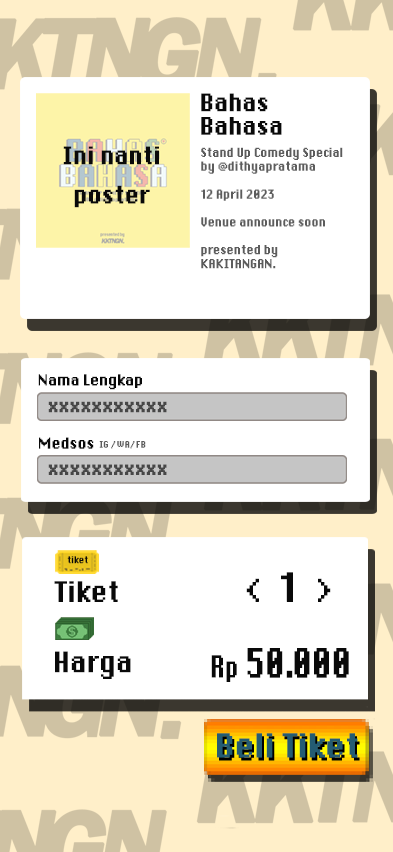
<style>
.page{position:relative;width:393px;height:852px;background:#ffffff}
.page>*{position:absolute;margin:0}
.t1{font:17.1px/23.4px "DePixel-Bold";color:#090909;font-weight:bold;scale:0.89 1}
.t2{font:17.1px/39.2px "DePixel-Bold";color:#090909;font-weight:bold;scale:0.89 1}
.t3{font:8.7px/13.9px "DePixel-Bold";color:#5c5c5c;font-weight:bold;scale:0.89 1}
.t4{font:10.8px "DePixel-Bold";color:#090909;font-weight:bold;scale:0.89 1}
.t5{font:13px "DePixel-Bold";color:#474747;font-weight:bold;scale:0.89 1}
.t6{font:6.4px "DePixel-Bold";color:#5c5c5c;font-weight:bold;scale:0.89 1}
.t7{font:6.5px "DePixel-Bold";color:#090909;font-weight:bold;scale:0.9 1}
.t8{font:28.9px "DePixel-Bold";color:#090909;font-weight:bold;scale:0.89 1}
.t9{font:20.1px "DePixel-Bold";color:#090909;font-weight:bold;scale:0.89 1}
.t10{font:28.8px "DePixel-Bold";color:#090909;font-weight:bold;scale:0.73 1}
.t11{font:21.6px "DePixel-Bold";color:#090909;font-weight:bold;scale:0.73 1}
.t12{font:19.7px "DePixel-Bold";color:#090909;font-weight:bold;scale:0.73 1}
.t13{font:23.5px "DePixel-Bold";color:#245c73;font-weight:bold;scale:0.9 1}
</style>
<div class="page">
<p class="t1" style="left:201px;top:93px;width:81px;height:42px">Bahas<br>Bahasa</p>
<p class="t2" style="left:63px;top:146px;width:96px;height:62px;text-align:center">Ini nanti<br>poster</p>
<p class="t3" style="left:201px;top:147px;width:142px;height:122px">Stand Up Comedy Special<br>by @dithyapratama<br><br>12 April 2023<br><br>Venue announce soon<br><br>presented by<br>KAKITANGAN.</p>
<p class="t4" style="left:38px;top:374px;width:104px;height:16px">Nama Lengkap</p>
<p class="t5" style="left:48px;top:401px;width:119px;height:12px">xxxxxxxxxxx</p>
<p class="t4" style="left:39px;top:437px;width:55px;height:12px">Medsos</p>
<p class="t6" style="left:99px;top:441px;width:47px;height:8px">IG / WA/ FB</p>
<p class="t5" style="left:48px;top:464px;width:119px;height:11px">xxxxxxxxxxx</p>
<p class="t7" style="left:67px;top:556px;width:21px;height:8px">tiket</p>
<p class="t8" style="left:54px;top:572px;width:277px;height:30px"><span class="t9">Tiket                   </span>&lt;  1  &gt;</p>
<p class="t9" style="left:55px;top:651px;width:76px;height:28px">Harga</p>
<p class="t10" style="left:211px;top:648px;width:138px;height:34px"><span class="t11">R</span><span class="t12">p</span> 50.000</p>
<p class="t13" style="left:217px;top:733px;width:141px;height:25px">Beli Tiket</p>
</div>
